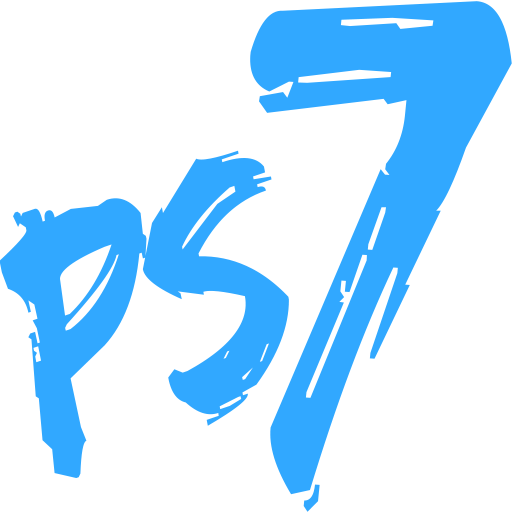
<style>
.page{position:relative;width:512px;height:512px;background:#ffffff}
.page>*{position:absolute;margin:0}
.t1{font:653.4px "EdoSZ";color:#31a8ff;text-transform:uppercase;scale:0.84 1}
.t2{font:352.5px "EdoSZ";letter-spacing:-0.05em;color:#31a8ff;text-transform:uppercase;scale:0.87 1}
</style>
<div class="page">
<p class="t1" style="left:250px;top:1px;width:262px;height:511px">7</p>
<p class="t2" style="left:0px;top:150px;width:289px;height:328px;rotate:-19deg">ps</p>
</div>
